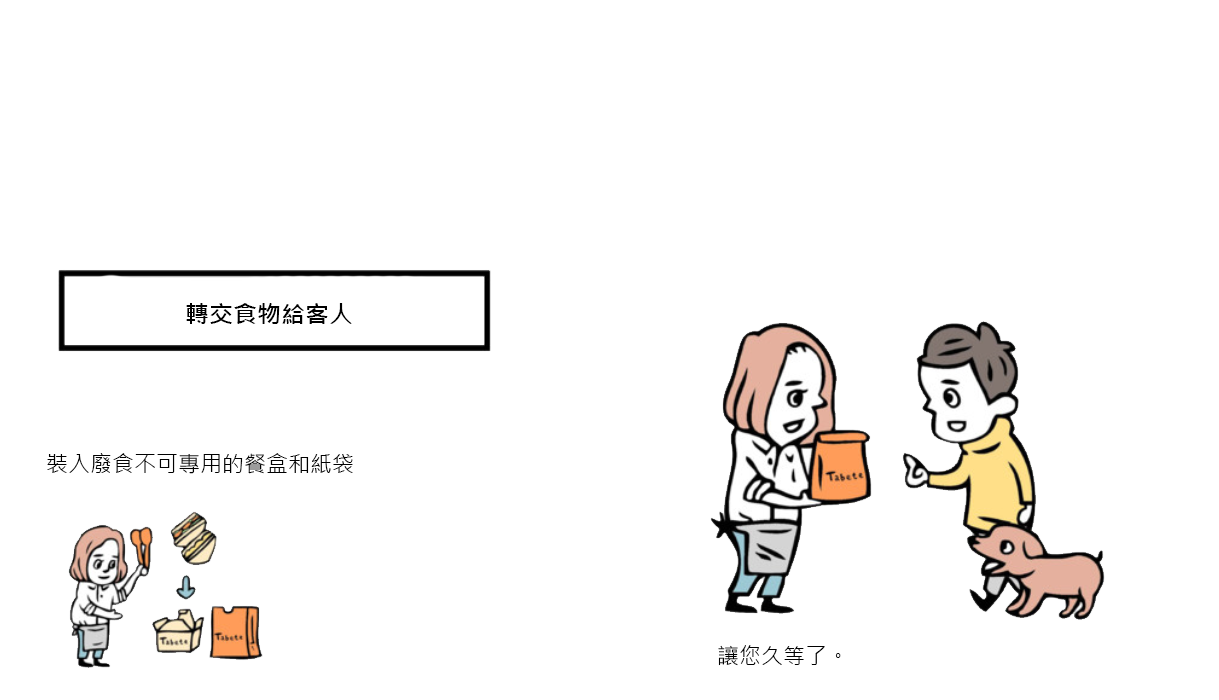
<style>
.page{position:relative;width:1219px;height:700px;background:#ffffff}
.page>*{position:absolute;margin:0}
.t1{font:24px "MicrosoftJhengHeiBold";color:#000000}
.t2{font:22px "MicrosoftJhengHeiRegular";color:#000000}
</style>
<div class="page">
<p class="t1" style="left:186px;top:303px;width:166px;height:21px">轉交食物給客人</p>
<p class="t2" style="left:47px;top:453px;width:306px;height:21px">裝入廢食不可專用的餐盒和紙袋</p>
<p class="t2" style="left:718px;top:645px;width:123px;height:21px">讓您久等了。</p>
</div>
